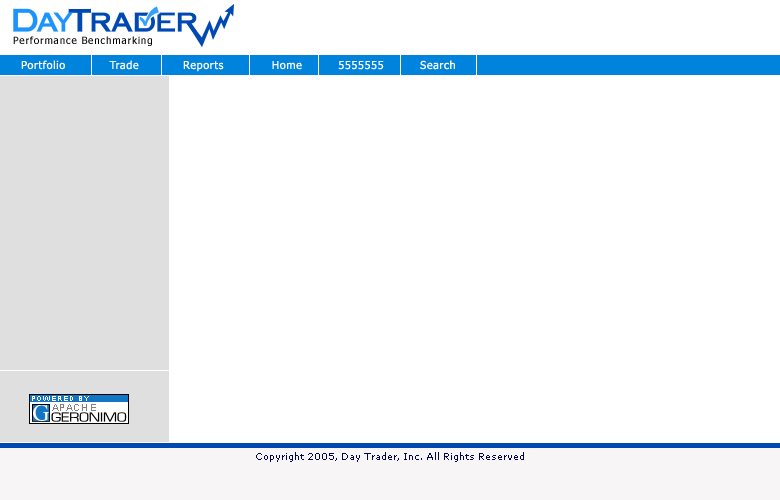
<style>
.page{position:relative;width:780px;height:500px;background:#ffffff}
.page>*{position:absolute;margin:0}
.t1{font:10px "Tahoma";letter-spacing:0.08em;color:#000000}
.t2{font:11px "Tahoma";letter-spacing:0.05em;color:#ffffff}
.t3{font:9px "Verdana";color:#000651}
</style>
<div class="page">
<p class="t1" style="left:13px;top:36px;width:139px;height:10px">Performance Benchmarking</p>
<p class="t2" style="left:21px;top:60px;width:434px;height:12px">Portfolio           Trade           Reports            Home         5555555         Search</p>
<p class="t3" style="left:256px;top:452px;width:268px;height:10px">Copyright 2005, Day Trader, Inc. All Rights Reserved</p>
</div>
